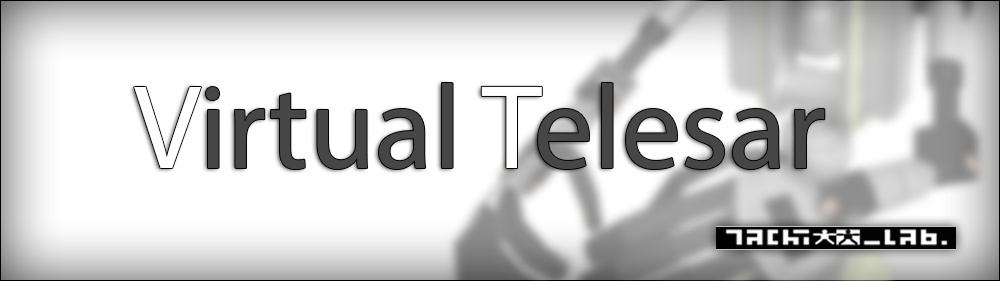
<style>
.page{position:relative;width:1000px;height:281px;background:#ffffff}
.page>*{position:absolute;margin:0}
.t1{font:120px "MyriadPro-Regular";color:#464646}
.t2{font:120px "MyriadPro-Regular";color:#ffffff}
</style>
<div class="page">
<p class="t1" style="left:134px;top:83px;width:691px;height:87px"><span class="t2">V</span>irtual <span class="t2">T</span>elesar</p>
</div>
